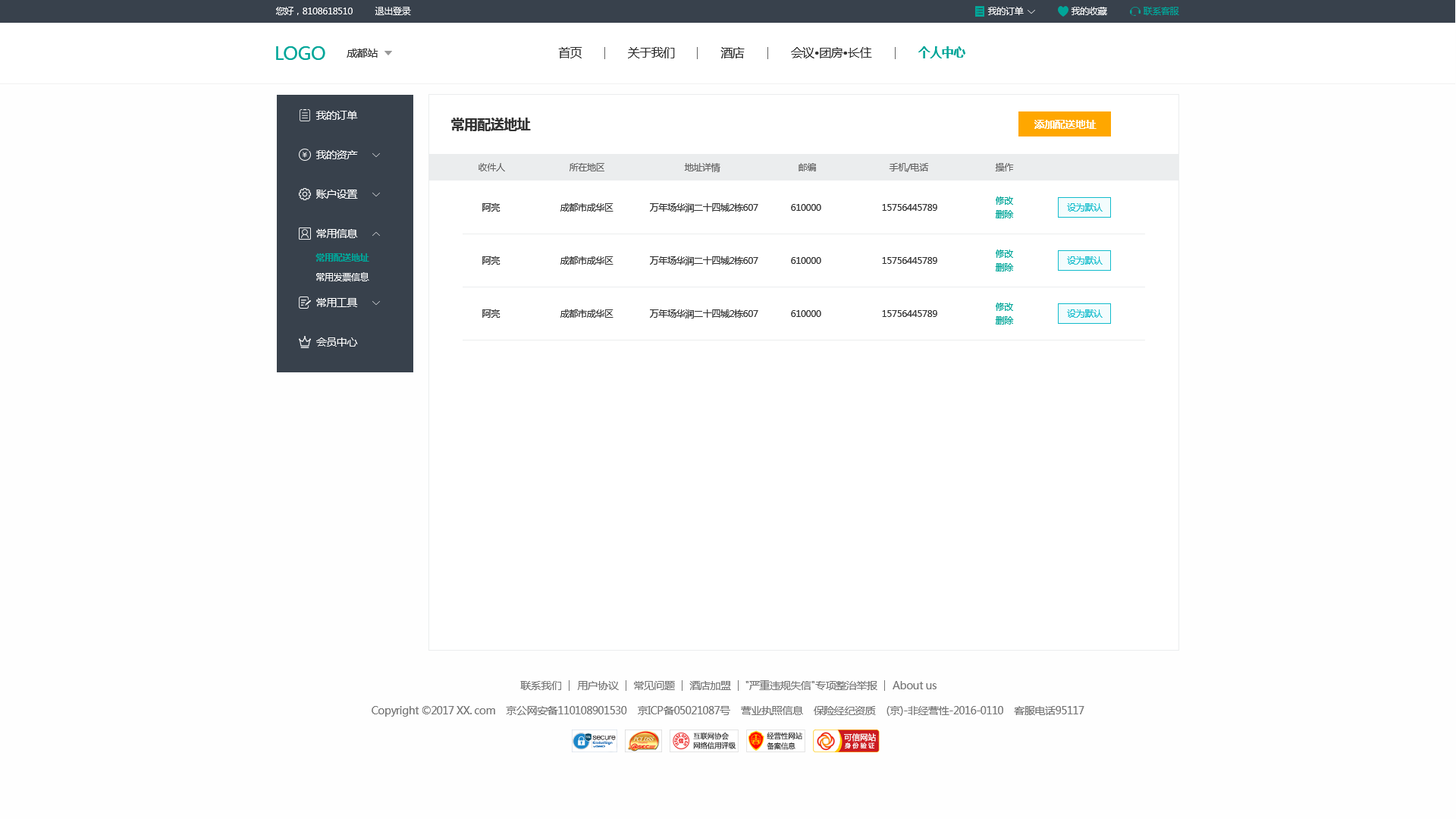
<style>
.page{position:relative;width:1456px;height:819px;background:#fefefe}
.page>*{position:absolute;margin:0}
.t1{font:9.1px "MicrosoftYaHei";letter-spacing:-0.03em;color:#ffffff}
.t2{font:9.1px "MicrosoftYaHei";letter-spacing:-0.03em;color:#00a699}
.t3{font:18.2px "MicrosoftYaHei";letter-spacing:-0.03em;color:#00a699}
.t4{font:10.6px "MicrosoftYaHei";letter-spacing:-0.03em;color:#333333}
.t5{font:12.1px "MicrosoftYaHei";letter-spacing:-0.03em;color:#333333}
.t6{font:12.1px "MicrosoftYaHei-Bold";letter-spacing:-0.03em;color:#00a699}
.t7{font:10.6px "MicrosoftYaHei";letter-spacing:-0.03em;color:#ffffff}
.t8{font:13.6px "MicrosoftYaHei-Bold";letter-spacing:-0.03em;color:#333333}
.t9{font:10.6px "MicrosoftYaHei-Bold";letter-spacing:-0.03em;color:#ffffff}
.t10{font:9.1px "MicrosoftYaHei";letter-spacing:-0.03em;color:#666666}
.t11{font:9.1px "MicrosoftYaHei";letter-spacing:-0.03em;color:#333333}
.t12{font:9.1px "MicrosoftYaHei";letter-spacing:-0.03em;color:#12bccc}
.t13{font:9.1px "MicrosoftYaHei-Bold";letter-spacing:-0.03em;color:#00a699}
.t14{font:10.6px "MicrosoftYaHei";letter-spacing:-0.03em;color:#777777}
</style>
<div class="page">
<p class="t1" style="left:276px;top:7px;width:77px;height:8px">您好，8108618510</p>
<p class="t1" style="left:375px;top:7px;width:36px;height:8px">退出登录</p>
<p class="t1" style="left:987px;top:7px;width:37px;height:8px">我的订单</p>
<p class="t1" style="left:1071px;top:7px;width:36px;height:8px">我的收藏</p>
<p class="t2" style="left:1144px;top:7px;width:35px;height:8px">联系客服</p>
<p class="t3" style="left:276px;top:46px;width:49px;height:14px">LOGO</p>
<p class="t4" style="left:347px;top:49px;width:31px;height:9px">成都站</p>
<p class="t5" style="left:558px;top:47px;width:24px;height:11px">首页</p>
<p class="t5" style="left:628px;top:47px;width:47px;height:11px">关于我们</p>
<p class="t5" style="left:720px;top:47px;width:25px;height:11px">酒店</p>
<p class="t5" style="left:791px;top:47px;width:81px;height:11px">会议•团房•长住</p>
<p class="t6" style="left:918px;top:46px;width:47px;height:12px">个人中心</p>
<p class="t7" style="left:315px;top:111px;width:43px;height:9px">我的订单</p>
<p class="t8" style="left:451px;top:118px;width:80px;height:13px">常用配送地址</p>
<p class="t9" style="left:1034px;top:120px;width:63px;height:9px">添加配送地址</p>
<p class="t7" style="left:315px;top:150px;width:43px;height:9px">我的资产</p>
<p class="t10" style="left:479px;top:163px;width:26px;height:8px">收件人</p>
<p class="t10" style="left:570px;top:163px;width:34px;height:8px">所在地区</p>
<p class="t10" style="left:684px;top:163px;width:36px;height:9px">地址详情</p>
<p class="t10" style="left:799px;top:163px;width:17px;height:8px">邮编</p>
<p class="t10" style="left:889px;top:163px;width:40px;height:9px">手机/电话</p>
<p class="t10" style="left:995px;top:163px;width:19px;height:8px">操作</p>
<p class="t7" style="left:316px;top:190px;width:42px;height:9px">账户设置</p>
<p class="t2" style="left:996px;top:196px;width:17px;height:9px">修改</p>
<p class="t11" style="left:482px;top:203px;width:18px;height:9px">阿亮</p>
<p class="t11" style="left:560px;top:203px;width:53px;height:9px">成都市成华区</p>
<p class="t11" style="left:650px;top:203px;width:108px;height:9px">万年场华润二十四城2栋607</p>
<p class="t11" style="left:791px;top:204px;width:30px;height:7px">610000</p>
<p class="t11" style="left:882px;top:204px;width:55px;height:7px">15756445789</p>
<p class="t12" style="left:1067px;top:203px;width:36px;height:9px">设为默认</p>
<p class="t2" style="left:995px;top:210px;width:19px;height:8px">删除</p>
<p class="t7" style="left:316px;top:229px;width:42px;height:9px">常用信息</p>
<p class="t13" style="left:315px;top:253px;width:54px;height:9px">常用配送地址</p>
<p class="t11" style="left:482px;top:256px;width:18px;height:9px">阿亮</p>
<p class="t11" style="left:560px;top:256px;width:53px;height:9px">成都市成华区</p>
<p class="t11" style="left:650px;top:256px;width:108px;height:9px">万年场华润二十四城2栋607</p>
<p class="t11" style="left:791px;top:257px;width:30px;height:7px">610000</p>
<p class="t11" style="left:882px;top:257px;width:55px;height:7px">15756445789</p>
<p class="t2" style="left:996px;top:249px;width:17px;height:9px">修改</p>
<p class="t12" style="left:1067px;top:256px;width:36px;height:9px">设为默认</p>
<p class="t2" style="left:995px;top:263px;width:19px;height:8px">删除</p>
<p class="t1" style="left:316px;top:272px;width:53px;height:9px">常用发票信息</p>
<p class="t7" style="left:316px;top:298px;width:42px;height:9px">常用工具</p>
<p class="t2" style="left:996px;top:303px;width:17px;height:8px">修改</p>
<p class="t11" style="left:482px;top:309px;width:18px;height:9px">阿亮</p>
<p class="t11" style="left:560px;top:309px;width:53px;height:9px">成都市成华区</p>
<p class="t11" style="left:650px;top:309px;width:108px;height:9px">万年场华润二十四城2栋607</p>
<p class="t11" style="left:791px;top:310px;width:30px;height:7px">610000</p>
<p class="t11" style="left:882px;top:310px;width:55px;height:7px">15756445789</p>
<p class="t2" style="left:995px;top:316px;width:19px;height:9px">删除</p>
<p class="t12" style="left:1067px;top:309px;width:36px;height:9px">设为默认</p>
<p class="t7" style="left:316px;top:337px;width:42px;height:10px">会员中心</p>
<p class="t14" style="left:520px;top:681px;width:41px;height:9px">联系我们</p>
<p class="t14" style="left:577px;top:681px;width:42px;height:9px">用户协议</p>
<p class="t14" style="left:634px;top:681px;width:41px;height:9px">常见问题</p>
<p class="t14" style="left:689px;top:681px;width:42px;height:9px">酒店加盟</p>
<p class="t14" style="left:745px;top:680px;width:132px;height:10px">"严重违规失信"专项整治举报</p>
<p class="t14" style="left:893px;top:681px;width:44px;height:8px">About us</p>
<p class="t14" style="left:372px;top:706px;width:712px;height:11px">Copyright ©2017 XX. com    京公网安备110108901530    京ICP备05021087号    营业执照信息    保险经纪资质    (京)-非经营性-2016-0110    客服电话95117</p>
</div>
